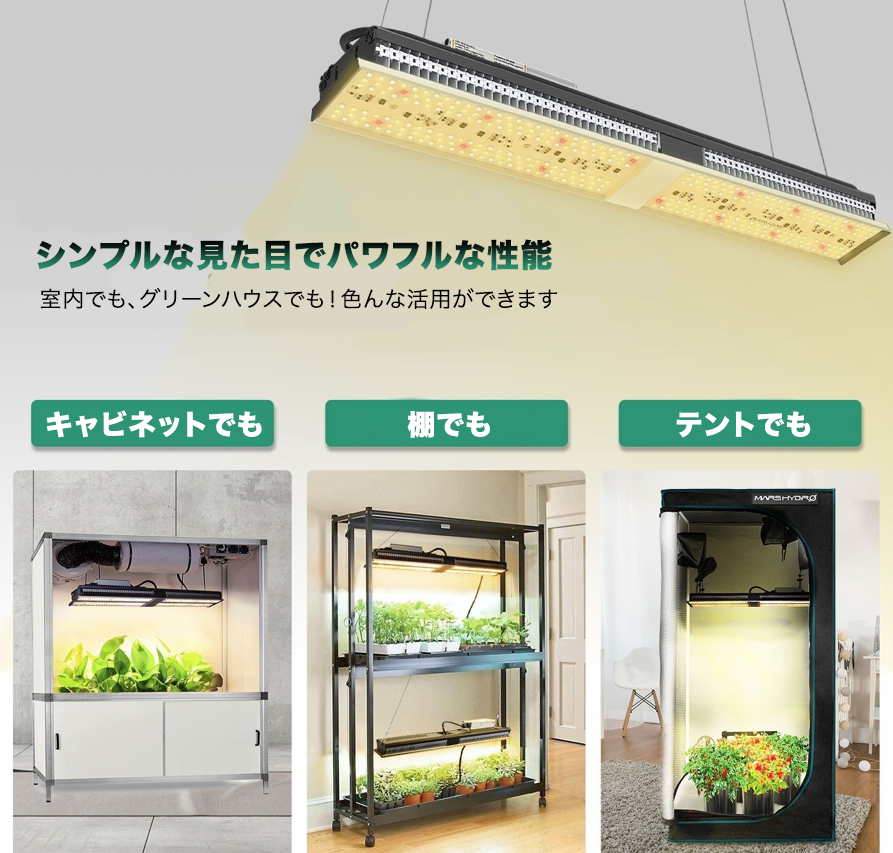
<style>
.page{position:relative;width:893px;height:853px}
.page>*{position:absolute;margin:0}
.t1{font:32px "HiraKakuStd-W8";letter-spacing:0.05em}
.t2{font:22px "HiraKakuPro-W3";letter-spacing:0.05em;color:#000000}
.t3{font:28px "HiraKakuStd-W8";letter-spacing:0.05em;color:#ffffff}
</style>
<div class="page">
<p class="t1" style="left:37px;top:239px;width:515px;height:32px">シンプルな見た目でパワフルな性能</p>
<p class="t2" style="left:40px;top:287px;width:517px;height:22px">室内でも、グリーンハウスでも！色んな活用ができます</p>
<p class="t3" style="left:46px;top:410px;width:216px;height:28px">キャビネットでも</p>
<p class="t3" style="left:407px;top:411px;width:83px;height:27px">棚でも</p>
<p class="t3" style="left:676px;top:411px;width:135px;height:27px">テントでも</p>
</div>
